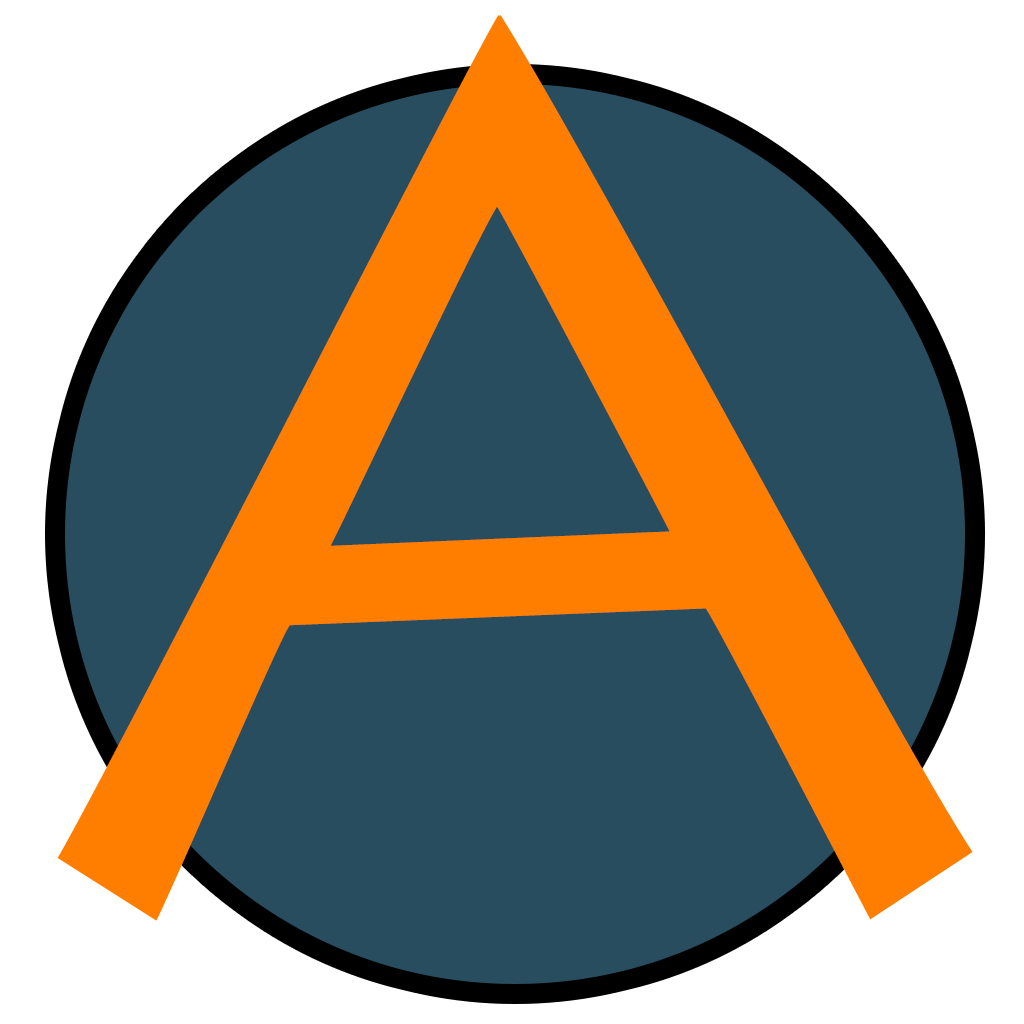
<style>
.page{position:relative;width:1024px;height:1024px;background:#284d5f}
.page>*{position:absolute;margin:0}
.t1{font:1200px "LithosPro-Regular";letter-spacing:-0.005em;color:#ff7e00}
</style>
<div class="page">
<p class="t1" style="left:57px;top:15px;width:916px;height:906px">A</p>
</div>
